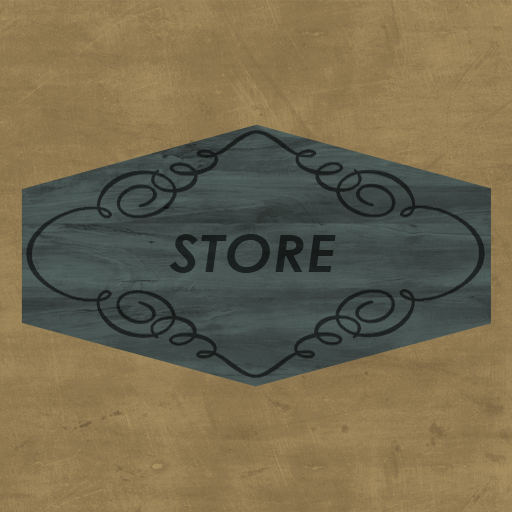
<style>
.page{position:relative;width:512px;height:512px}
.page>*{position:absolute;margin:0}
.t1{font:52px "CenturyGothic-BoldItalic";letter-spacing:0.025em;color:#191f1d;text-transform:uppercase;scale:1.07 1}
</style>
<div class="page">
<p class="t1" style="left:169px;top:234px;width:167px;height:39px">store</p>
</div>
